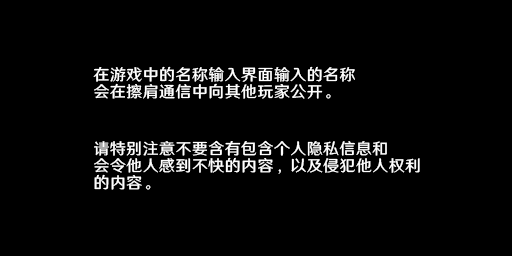
<style>
.page{position:relative;width:512px;height:256px;background:#000000}
.page>*{position:absolute;margin:0}
.t1{font:16px/17.3px "HYWenHei-FEW";letter-spacing:0.025em;color:#ffffff}
</style>
<div class="page">
<p class="t1" style="left:93px;top:66px;width:262px;height:33px">在游戏中的名称输入界面输入的名称<br>会在擦肩通信中向其他玩家公开。</p>
<p class="t1" style="left:94px;top:140px;width:326px;height:50px">请特别注意不要含有包含个人隐私信息和<br>会令他人感到不快的内容，以及侵犯他人权利的内容。</p>
</div>
